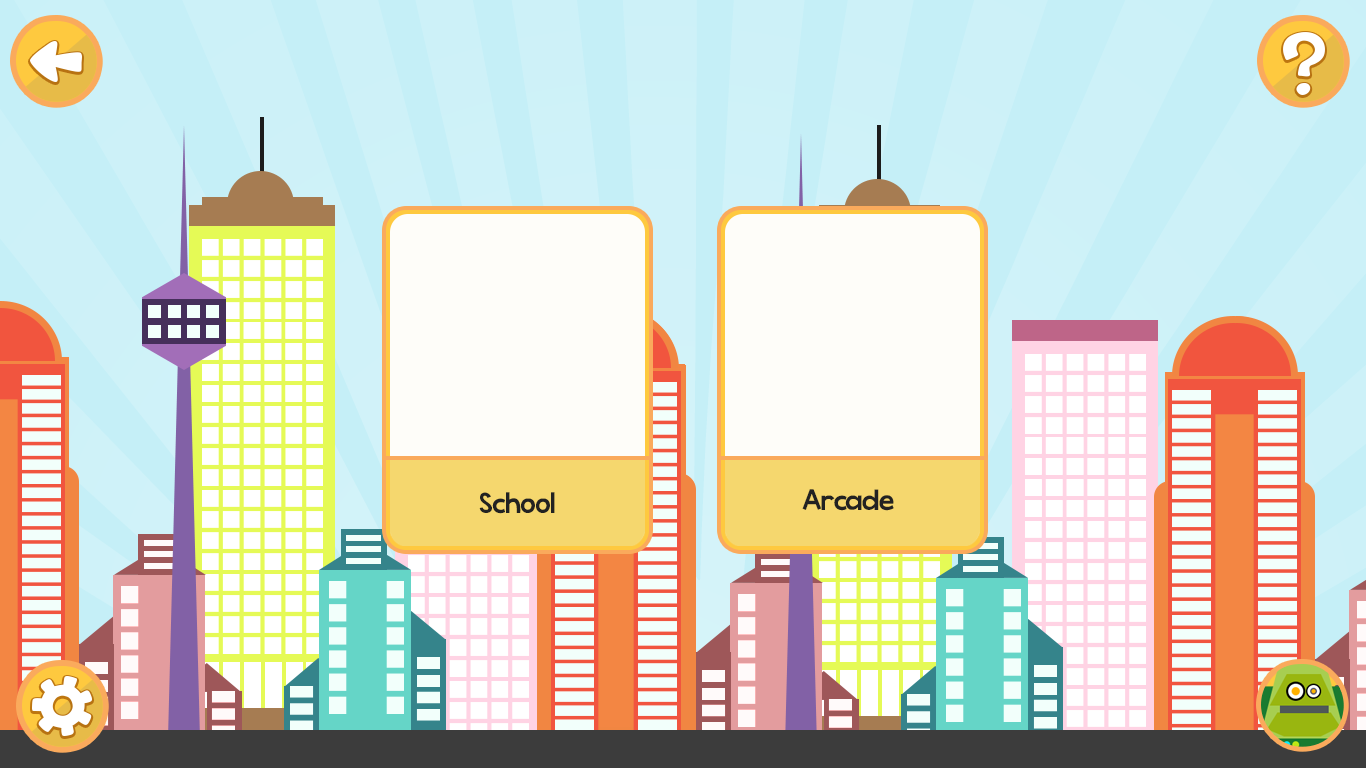
<style>
.page{position:relative;width:1366px;height:768px}
.page>*{position:absolute;margin:0}
.t1{font:30px "KGWhattheTeacherWants";color:#222222}
</style>
<div class="page">
<p class="t1" style="left:479px;top:492px;width:76px;height:22px">School</p>
<p class="t1" style="left:802px;top:489px;width:92px;height:22px">Arcade</p>
</div>
